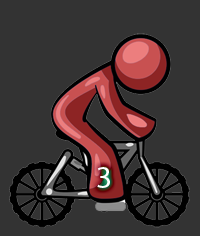
<style>
.page{position:relative;width:200px;height:236px;background:#333333}
.page>*{position:absolute;margin:0}
.t1{font:31.5px "MyriadPro-Regular";color:#ffffff}
</style>
<div class="page">
<p class="t1" style="left:97px;top:167px;width:13px;height:21px">3</p>
</div>
